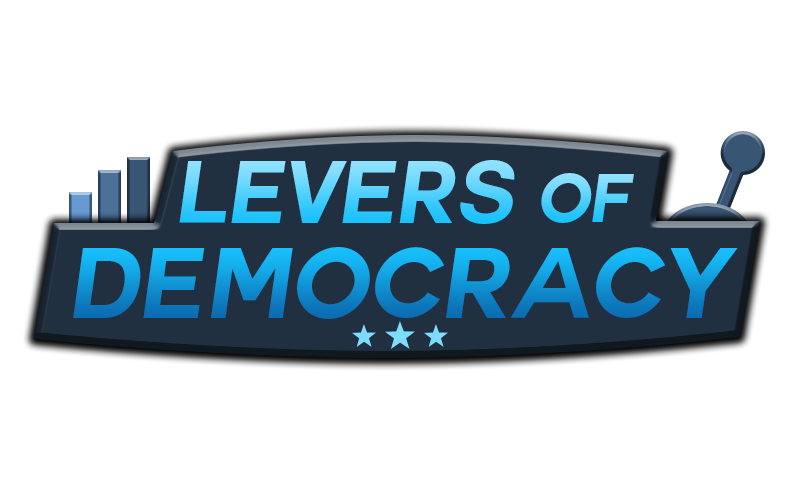
<style>
.page{position:relative;width:800px;height:500px;background:#ffffff}
.page>*{position:absolute;margin:0}
.t1{font:86.7px "Couture-BoldItalic"}
.t2{font:66.7px "Couture-BoldItalic"}
.t3{font:97.8px "Couture-BoldItalic"}
</style>
<div class="page">
<p class="t1" style="left:179px;top:160px;width:336px;height:64px">Levers</p>
<p class="t2" style="left:541px;top:173px;width:93px;height:50px">Of</p>
<p class="t3" style="left:73px;top:247px;width:665px;height:72px">Democracy</p>
</div>
